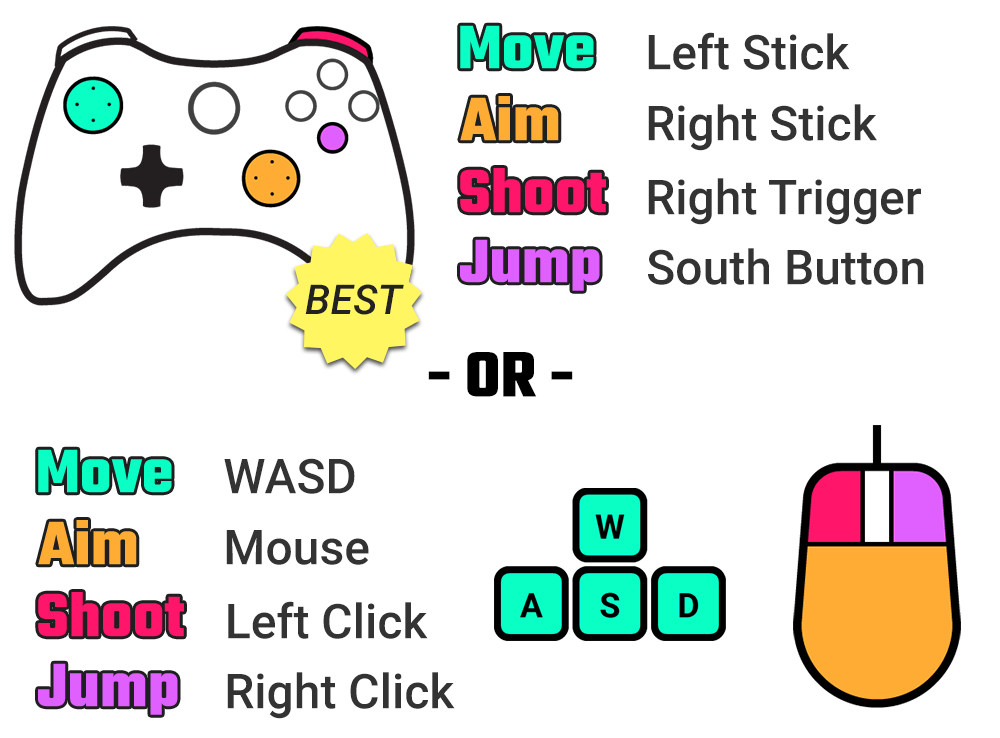
<style>
.page{position:relative;width:1000px;height:738px;background:#ffffff}
.page>*{position:absolute;margin:0}
.t1{font:66.3px "Teko-Bold";color:#0affc4}
.t2{font:48px "Roboto-Medium";color:#333333}
.t3{font:66.3px "Teko-Bold";color:#ffac35}
.t4{font:66.3px "Teko-Bold";color:#ff156a}
.t5{font:66.3px "Teko-Bold";color:#e05fff}
.t6{font:41.1px "Roboto-MediumItalic";color:#222222}
.t7{font:69.2px "Teko-Bold";color:#000000}
</style>
<div class="page">
<p class="t1" style="left:460px;top:25px;width:134px;height:44px">Move</p>
<p class="t2" style="left:648px;top:32px;width:202px;height:38px">Left Stick</p>
<p class="t3" style="left:460px;top:96px;width:99px;height:45px">Aim</p>
<p class="t2" style="left:648px;top:104px;width:229px;height:47px">Right Stick</p>
<p class="t4" style="left:460px;top:168px;width:146px;height:45px">Shoot</p>
<p class="t2" style="left:648px;top:178px;width:273px;height:47px">Right Trigger</p>
<p class="t5" style="left:460px;top:239px;width:140px;height:52px">Jump</p>
<p class="t2" style="left:648px;top:248px;width:276px;height:37px">South Button</p>
<p class="t6" style="left:305px;top:284px;width:99px;height:31px">BEST</p>
<p class="t7" style="left:428px;top:352px;width:145px;height:45px">- OR -</p>
<p class="t1" style="left:38px;top:449px;width:134px;height:44px">Move</p>
<p class="t2" style="left:224px;top:458px;width:131px;height:36px">WASD</p>
<p class="t3" style="left:38px;top:520px;width:99px;height:45px">Aim</p>
<p class="t2" style="left:226px;top:530px;width:143px;height:35px">Mouse</p>
<p class="t4" style="left:38px;top:592px;width:146px;height:45px">Shoot</p>
<p class="t2" style="left:228px;top:601px;width:200px;height:38px">Left Click</p>
<p class="t5" style="left:38px;top:663px;width:140px;height:52px">Jump</p>
<p class="t2" style="left:227px;top:672px;width:228px;height:47px">Right Click</p>
</div>
